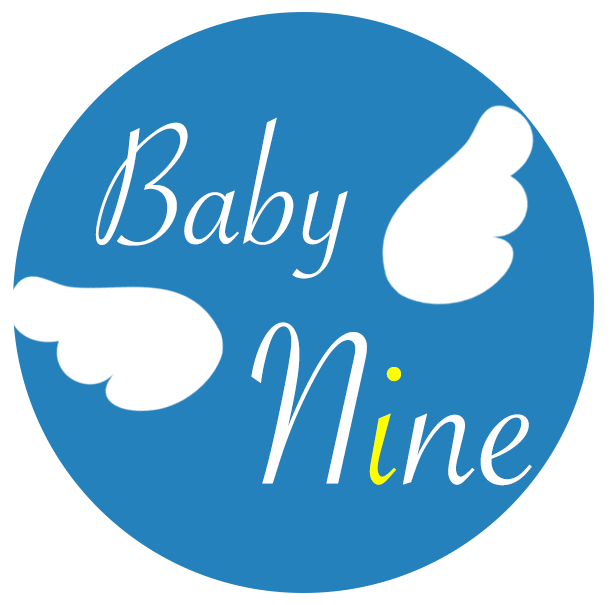
<style>
.page{position:relative;width:612px;height:605px;background:#2581bc}
.page>*{position:absolute;margin:0}
.t1{font:182px "SavoyeLetPlain";color:#ffffff}
.t2{font:243.5px "SavoyeLetPlain";color:#ffffff}
.t3{font:243.5px "SavoyeLetPlain";color:#ffff00}
</style>
<div class="page">
<p class="t1" style="left:95px;top:117px;width:253px;height:162px">Baby</p>
<p class="t2" style="left:251px;top:322px;width:281px;height:164px">N<span class="t3">i</span>ne</p>
</div>
